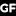
<style>
.page{position:relative;width:16px;height:16px;background:#000000}
.page>*{position:absolute;margin:0}
.t1{font:11.2px "MontserratRoman-SemiBold";color:#ffffff}
</style>
<div class="page">
<p class="t1" style="left:0px;top:3px;width:16px;height:10px">GF</p>
</div>
